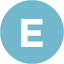
<style>
.page{position:relative;width:64px;height:64px;background:#72b8cc}
.page>*{position:absolute;margin:0}
.t1{font:40px "Gotham-Bold";letter-spacing:-0.12em;color:#ffffff}
</style>
<div class="page">
<p class="t1" style="left:21px;top:19px;width:22px;height:28px">E</p>
</div>
